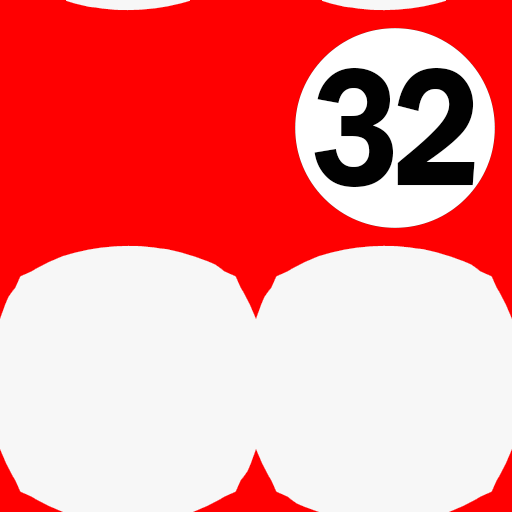
<style>
.page{position:relative;width:512px;height:512px;background:#f7f7f7}
.page>*{position:absolute;margin:0}
.t1{font:172.5px "FranklinGothic-Demi";letter-spacing:-0.05em;color:#010101;scale:0.87 1}
</style>
<div class="page">
<p class="t1" style="left:314px;top:68px;width:161px;height:119px">32</p>
</div>
